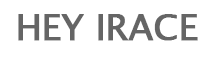
<style>
.page{position:relative;width:202px;height:61px;background:#ffffff}
.page>*{position:absolute;margin:0}
.t1{font:36px "LucidaSansUnicode";letter-spacing:-0.025em;color:#656565;text-transform:uppercase;font-weight:bold}
</style>
<div class="page">
<p class="t1" style="left:18px;top:14px;width:180px;height:27px">Hey iRace</p>
</div>
